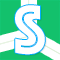
<style>
.page{position:relative;width:60px;height:60px;background:#ffffff}
.page>*{position:absolute;margin:0}
.t1{font:70px "Phosphate-Inline";letter-spacing:0.055em;color:#ffffff}
</style>
<div class="page">
<p class="t1" style="left:15px;top:5px;width:30px;height:50px">S</p>
</div>
